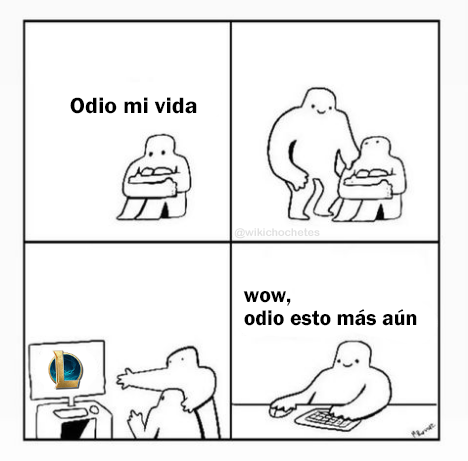
<style>
.page{position:relative;width:468px;height:461px;background:#ffffff}
.page>*{position:absolute;margin:0}
.t1{font:22.8px "FranklinGothic-Demi";color:#000000;scale:1.04 1}
.t2{font:10.8px "ArialRoundedMTBold";color:#e0e0e0}
.t3{font:21.7px "FranklinGothic-Demi";color:#000000}
</style>
<div class="page">
<p class="t1" style="left:70px;top:97px;width:127px;height:17px">Odio mi vida</p>
<p class="t2" style="left:234px;top:228px;width:86px;height:11px">@wikichochetes</p>
<p class="t3" style="left:243px;top:291px;width:174px;height:35px">wow,<br>odio esto más aún</p>
</div>
